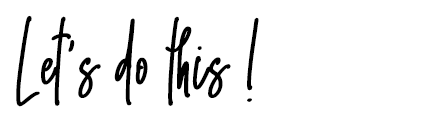
<style>
.page{position:relative;width:428px;height:119px;background:#ffffff}
.page>*{position:absolute;margin:0}
.t1{font:79.3px "Emmasignature";letter-spacing:0.033em;color:#000000;scale:0.84 1}
</style>
<div class="page">
<p class="t1" style="left:16px;top:15px;width:243px;height:92px">Let's do this !</p>
</div>
